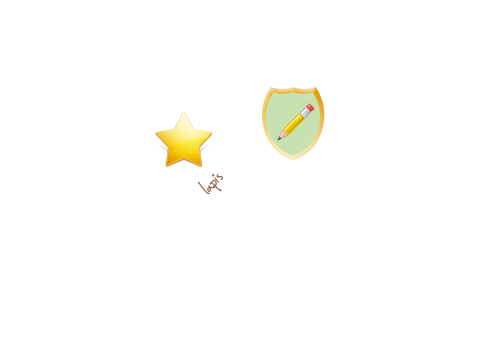
<style>
.page{position:relative;width:504px;height:360px;background:#ffffff}
.page>*{position:absolute;margin:0}
.t1{font:48.7px "JellykaEstryasHandwriting";color:#92624f}
</style>
<div class="page">
<p class="t1" style="left:197px;top:174px;width:27px;height:21px;rotate:-45deg">lapis</p>
</div>
